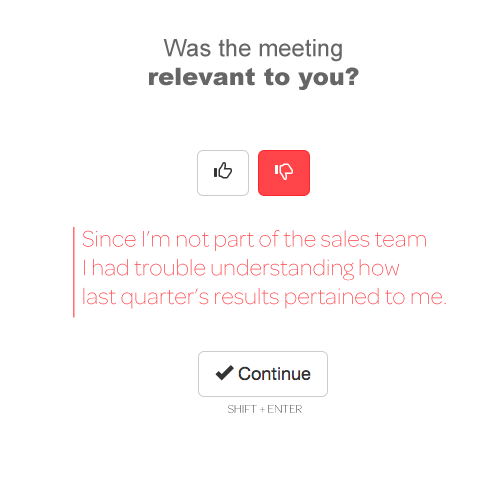
<style>
.page{position:relative;width:500px;height:500px;background:#ffffff}
.page>*{position:absolute;margin:0}
.t1{font:24px "Arial-Black";color:#666666}
.t2{font:24px "ArialMT";color:#666666}
.t3{font:24px "OmnesExtraLight-Roman";color:#ff444a}
.t4{font:12px "OmnesExtraLight-Roman"}
</style>
<div class="page">
<p class="t1" style="left:149px;top:39px;width:210px;height:51px;text-align:center"><span class="t2">Was the meeting <br></span>relevant to you?</p>
<p class="t3" style="left:82px;top:230px;width:364px;height:79px">Since I’m not part of the sales team<br>I had trouble understanding how<br>last quarter’s results pertained to me.</p>
<p class="t4" style="left:228px;top:405px;width:74px;height:8px">SHIFT + ENTER</p>
</div>
